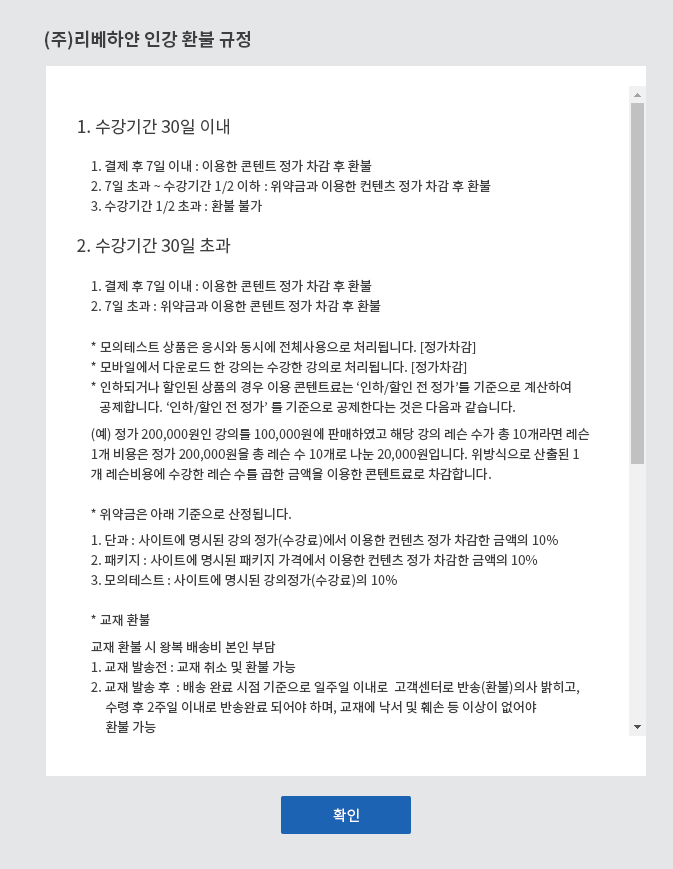
<style>
.page{position:relative;width:673px;height:869px;background:#ffffff}
.page>*{position:absolute;margin:0}
.t1{font:18px "NotoSansKR-Bold";color:#3f3f3f}
.t2{font:17px "NotoSansKR-Regular";color:#3f3f3f}
.t3{font:13px/20px "NotoSansKR-Regular";color:#3f3f3f}
.t4{font:13px "NotoSansKR-Regular";color:#3f3f3f}
.t5{font:15px "NotoSansKR-Regular";color:#ffffff}
</style>
<div class="page">
<p class="t1" style="left:45px;top:30px;width:205px;height:20px">(주)리베하얀 인강 환불 규정</p>
<p class="t2" style="left:78px;top:118px;width:151px;height:17px">1. 수강기간 30일 이내</p>
<p class="t3" style="left:91px;top:159px;width:400px;height:55px">1. 결제 후 7일 이내 : 이용한 콘텐트 정가 차감 후 환불<br>2. 7일 초과 ~ 수강기간 1/2 이하 : 위약금과 이용한 컨텐츠 정가 차감 후 환불 <br>3. 수강기간 1/2 초과 : 환불 불가</p>
<p class="t2" style="left:77px;top:237px;width:154px;height:17px">2. 수강기간 30일 초과</p>
<p class="t3" style="left:91px;top:279px;width:290px;height:34px">1. 결제 후 7일 이내 : 이용한 콘텐트 정가 차감 후 환불<br>2. 7일 초과 : 위약금과 이용한 콘텐트 정가 차감 후 환불</p>
<p class="t3" style="left:91px;top:340px;width:480px;height:75px">* 모의테스트 상품은 응시와 동시에 전체사용으로 처리됩니다. [정가차감]<br>* 모바일에서 다운로드 한 강의는 수강한 강의로 처리됩니다. [정가차감]<br>* 인하되거나 할인된 상품의 경우 이용 콘텐트료는 ‘인하/할인 전 정가’를 기준으로 계산하여<br>   공제합니다. ‘인하/할인 전 정가’ 를 기준으로 공제한다는 것은 다음과 같습니다.</p>
<p class="t3" style="left:91px;top:427px;width:499px;height:54px">(예) 정가 200,000원인 강의를 100,000원에 판매하였고 해당 강의 레슨 수가 총 10개라면 레슨<br>1개 비용은 정가 200,000원을 총 레슨 수 10개로 나눈 20,000원입니다. 위방식으로 산출된 1<br>개 레슨비용에 수강한 레슨 수를 곱한 금액을 이용한 콘텐트료로 차감합니다.</p>
<p class="t4" style="left:91px;top:507px;width:200px;height:14px">* 위약금은 아래 기준으로 산정됩니다.</p>
<p class="t3" style="left:91px;top:533px;width:467px;height:55px">1. 단과 : 사이트에 명시된 강의 정가(수강료)에서 이용한 컨텐츠 정가 차감한 금액의 10%<br>2. 패키지 : 사이트에 명시된 패키지 가격에서 이용한 컨텐츠 정가 차감한 금액의 10%<br>3. 모의테스트 : 사이트에 명시된 강의정가(수강료)의 10%</p>
<p class="t4" style="left:91px;top:613px;width:59px;height:14px">* 교재 환불</p>
<p class="t4" style="left:91px;top:640px;width:185px;height:14px">교재 환불 시 왕복 배송비 본인 부담</p>
<p class="t3" style="left:91px;top:660px;width:489px;height:74px">1. 교재 발송전 : 교재 취소 및 환불 가능<br>2. 교재 발송 후  : 배송 완료 시점 기준으로 일주일 이내로  고객센터로 반송(환불)의사 밝히고,<br>     수령 후 2주일 이내로 반송완료 되어야 하며, 교재에 낙서 및 훼손 등 이상이 없어야 <br>     환불 가능</p>
<p class="t5" style="left:333px;top:808px;width:26px;height:14px">확인</p>
</div>
